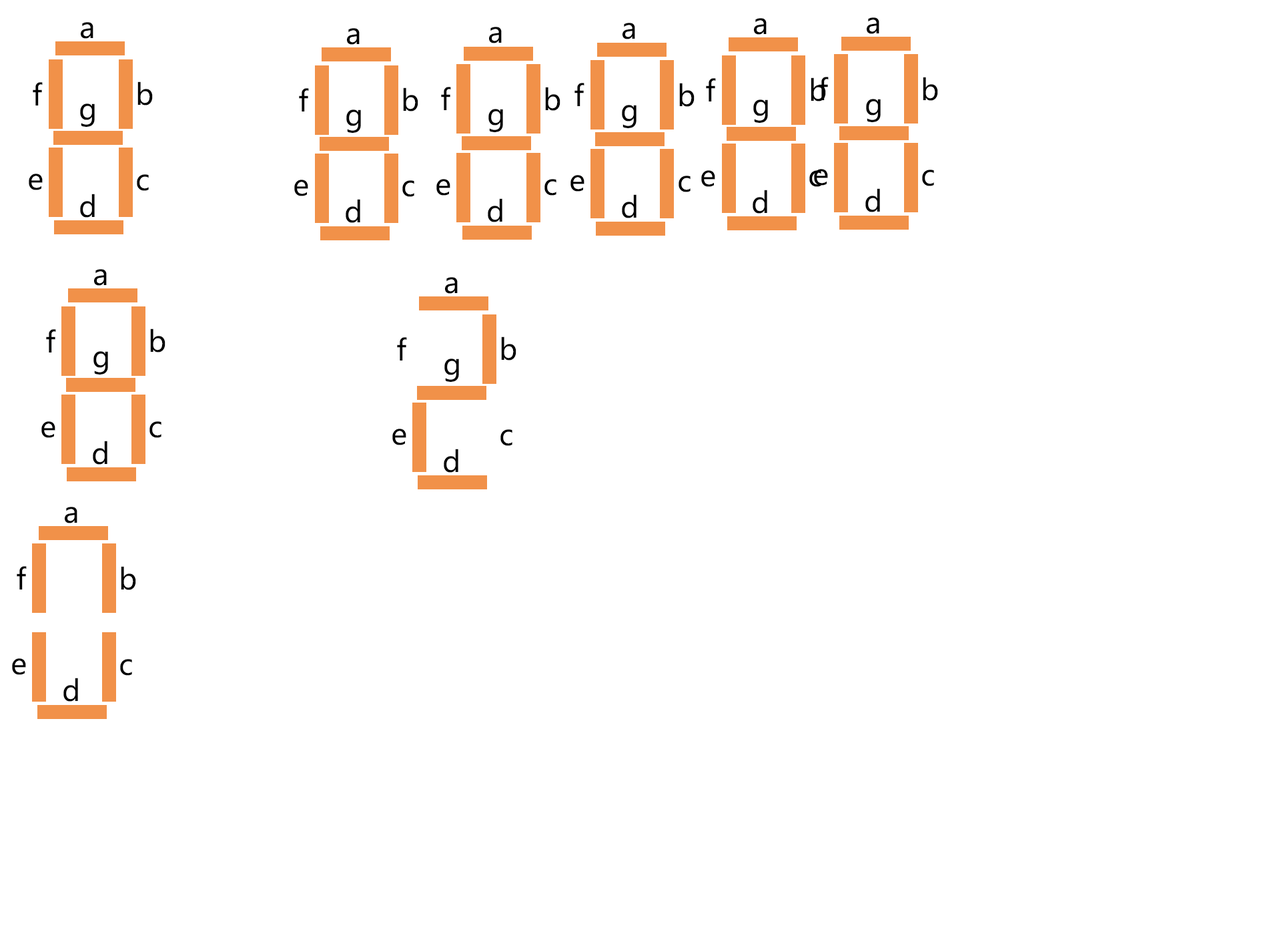
<style>
.page{position:relative;width:1261px;height:946px;background:#ffffff}
.page>*{position:absolute;margin:0}
.t1{font:28.6px "MicrosoftYaHei";color:#000000}
</style>
<div class="page">
<p class="t1" style="left:867px;top:17px;width:12px;height:17px">a</p>
<p class="t1" style="left:81px;top:22px;width:12px;height:17px">a</p>
<p class="t1" style="left:347px;top:28px;width:13px;height:17px">a</p>
<p class="t1" style="left:489px;top:27px;width:13px;height:16px">a</p>
<p class="t1" style="left:623px;top:23px;width:12px;height:16px">a</p>
<p class="t1" style="left:754px;top:18px;width:13px;height:17px">a</p>
<p class="t1" style="left:811px;top:77px;width:15px;height:24px">b</p>
<p class="t1" style="left:819px;top:77px;width:10px;height:23px">f</p>
<p class="t1" style="left:923px;top:77px;width:15px;height:24px">b</p>
<p class="t1" style="left:33px;top:82px;width:10px;height:23px">f</p>
<p class="t1" style="left:137px;top:81px;width:16px;height:24px">b</p>
<p class="t1" style="left:299px;top:88px;width:10px;height:23px">f</p>
<p class="t1" style="left:403px;top:87px;width:15px;height:24px">b</p>
<p class="t1" style="left:441px;top:87px;width:10px;height:23px">f</p>
<p class="t1" style="left:545px;top:87px;width:16px;height:24px">b</p>
<p class="t1" style="left:575px;top:83px;width:10px;height:23px">f</p>
<p class="t1" style="left:679px;top:83px;width:16px;height:24px">b</p>
<p class="t1" style="left:706px;top:78px;width:10px;height:23px">f</p>
<p class="t1" style="left:753px;top:99px;width:15px;height:24px">g</p>
<p class="t1" style="left:866px;top:99px;width:15px;height:23px">g</p>
<p class="t1" style="left:80px;top:103px;width:15px;height:24px">g</p>
<p class="t1" style="left:346px;top:109px;width:15px;height:24px">g</p>
<p class="t1" style="left:488px;top:109px;width:15px;height:23px">g</p>
<p class="t1" style="left:622px;top:105px;width:15px;height:23px">g</p>
<p class="t1" style="left:29px;top:173px;width:14px;height:17px">e</p>
<p class="t1" style="left:701px;top:170px;width:14px;height:17px">e</p>
<p class="t1" style="left:809px;top:170px;width:12px;height:17px">c</p>
<p class="t1" style="left:814px;top:169px;width:14px;height:17px">e</p>
<p class="t1" style="left:922px;top:169px;width:12px;height:17px">c</p>
<p class="t1" style="left:137px;top:174px;width:12px;height:17px">c</p>
<p class="t1" style="left:294px;top:179px;width:14px;height:17px">e</p>
<p class="t1" style="left:402px;top:180px;width:12px;height:17px">c</p>
<p class="t1" style="left:436px;top:179px;width:14px;height:17px">e</p>
<p class="t1" style="left:544px;top:179px;width:13px;height:17px">c</p>
<p class="t1" style="left:571px;top:175px;width:14px;height:17px">e</p>
<p class="t1" style="left:679px;top:175px;width:12px;height:17px">c</p>
<p class="t1" style="left:80px;top:194px;width:15px;height:24px">d</p>
<p class="t1" style="left:622px;top:194px;width:15px;height:24px">d</p>
<p class="t1" style="left:753px;top:190px;width:14px;height:24px">d</p>
<p class="t1" style="left:865px;top:188px;width:15px;height:24px">d</p>
<p class="t1" style="left:346px;top:199px;width:14px;height:24px">d</p>
<p class="t1" style="left:488px;top:198px;width:14px;height:24px">d</p>
<p class="t1" style="left:94px;top:269px;width:13px;height:17px">a</p>
<p class="t1" style="left:445px;top:277px;width:13px;height:17px">a</p>
<p class="t1" style="left:46px;top:329px;width:10px;height:23px">f</p>
<p class="t1" style="left:150px;top:328px;width:15px;height:24px">b</p>
<p class="t1" style="left:397px;top:337px;width:10px;height:23px">f</p>
<p class="t1" style="left:501px;top:336px;width:15px;height:24px">b</p>
<p class="t1" style="left:93px;top:351px;width:15px;height:23px">g</p>
<p class="t1" style="left:444px;top:358px;width:15px;height:24px">g</p>
<p class="t1" style="left:41px;top:421px;width:14px;height:17px">e</p>
<p class="t1" style="left:149px;top:421px;width:12px;height:17px">c</p>
<p class="t1" style="left:392px;top:428px;width:14px;height:17px">e</p>
<p class="t1" style="left:500px;top:429px;width:12px;height:17px">c</p>
<p class="t1" style="left:93px;top:440px;width:14px;height:24px">d</p>
<p class="t1" style="left:444px;top:448px;width:14px;height:24px">d</p>
<p class="t1" style="left:65px;top:506px;width:12px;height:17px">a</p>
<p class="t1" style="left:17px;top:566px;width:10px;height:23px">f</p>
<p class="t1" style="left:121px;top:566px;width:15px;height:24px">b</p>
<p class="t1" style="left:12px;top:658px;width:14px;height:17px">e</p>
<p class="t1" style="left:120px;top:659px;width:12px;height:16px">c</p>
<p class="t1" style="left:63px;top:677px;width:15px;height:24px">d</p>
</div>
